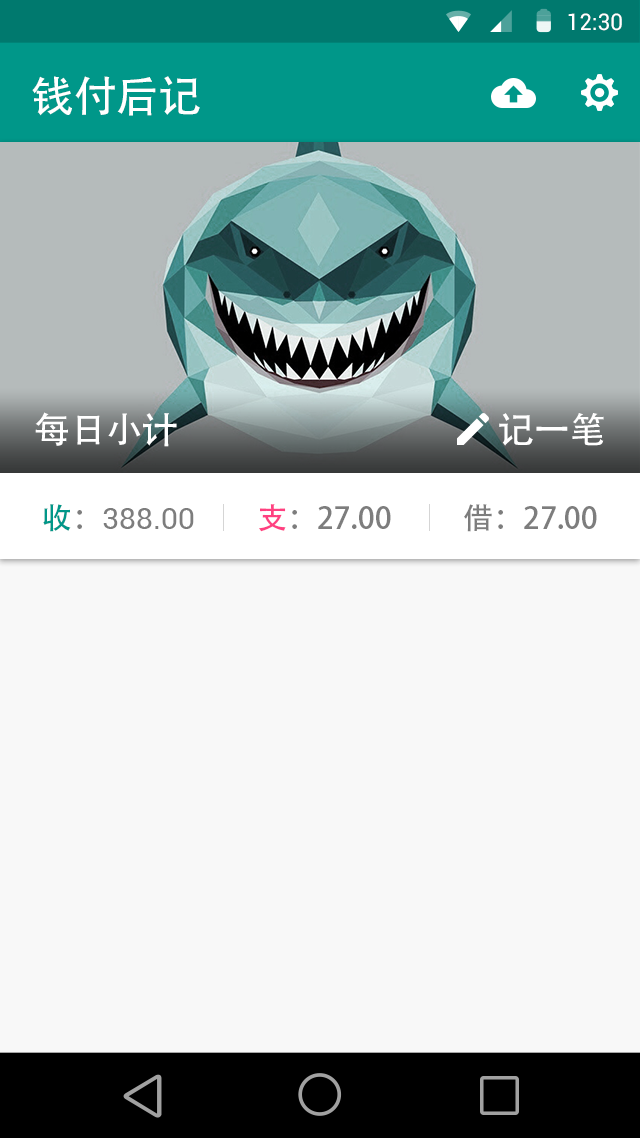
<style>
.page{position:relative;width:640px;height:1138px;background:#f8f8f8}
.page>*{position:absolute;margin:0}
.t1{font:22.6px "Roboto-Regular";color:#ffffff}
.t2{font:42.7px "AdobeHeitiStd-Regular";color:#ffffff}
.t3{font:36px "AdobeHeitiStd-Regular";color:#ffffff}
.t4{font:29.9px "Roboto-Regular";color:#7d7d7d}
.t5{font:29.9px "AdobeHeitiStd-Regular";color:#009789}
.t6{font:29.9px "AdobeHeitiStd-Regular";color:#7d7d7d}
.t7{font:29.9px "AdobeHeitiStd-Regular";color:#ff4081}
</style>
<div class="page">
<p class="t1" style="left:568px;top:13px;width:54px;height:18px">12:30</p>
<p class="t2" style="left:32px;top:76px;width:168px;height:40px">钱付后记</p>
<p class="t3" style="left:35px;top:412px;width:142px;height:35px">每日小计</p>
<p class="t3" style="left:499px;top:413px;width:105px;height:33px">记一笔</p>
<p class="t4" style="left:43px;top:504px;width:151px;height:28px"><span class="t5">收</span><span class="t6">：</span>388.00</p>
<p class="t6" style="left:259px;top:504px;width:132px;height:28px"><span class="t7">支</span>：27.00</p>
<p class="t6" style="left:464px;top:504px;width:133px;height:28px">借：27.00</p>
</div>
